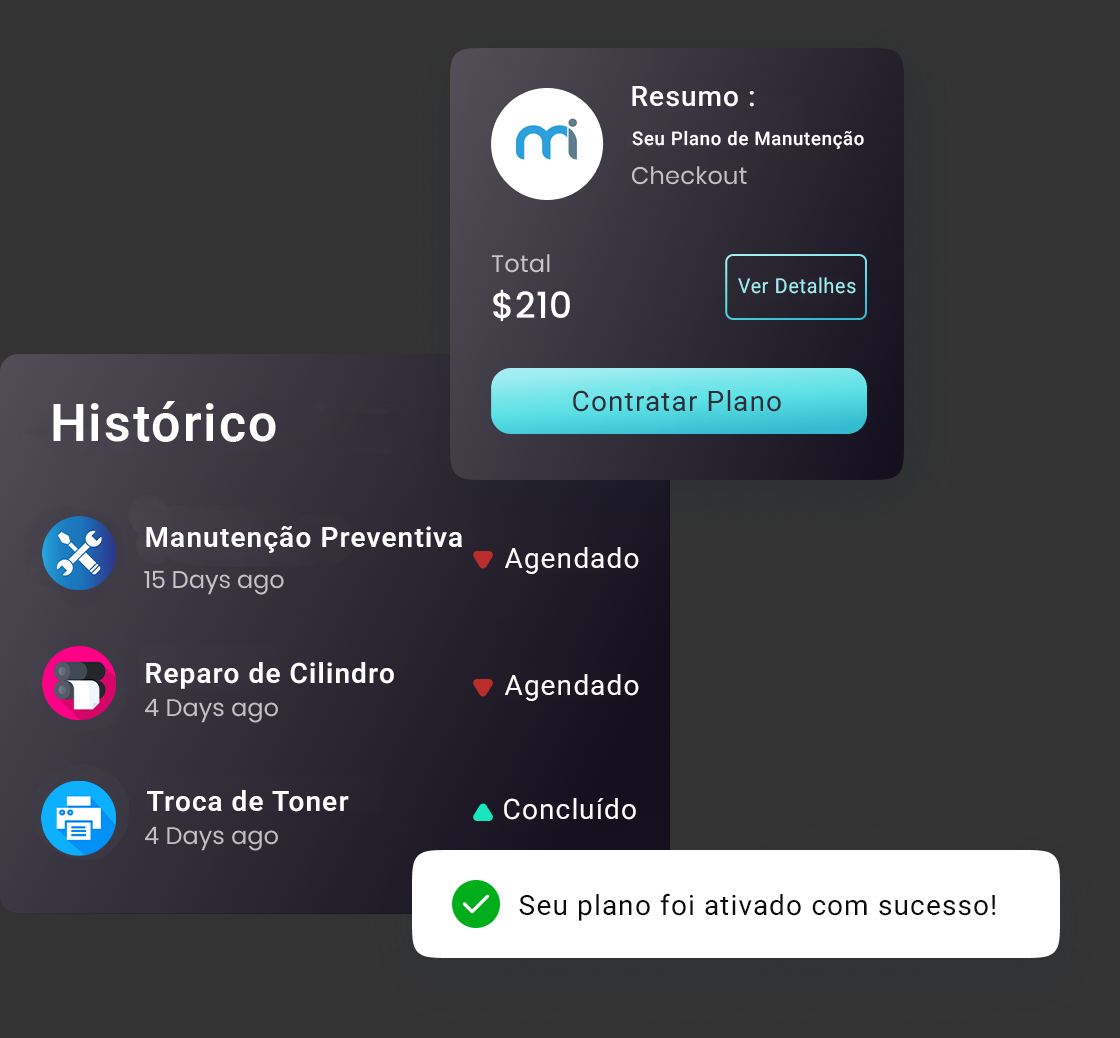
<style>
.page{position:relative;width:1120px;height:1038px;background:#333333}
.page>*{position:absolute;margin:0}
.t1{font:28px "Roboto-Medium";letter-spacing:0.04em;color:#ffffff}
.t2{font:18.6px "Roboto-Medium";letter-spacing:0.04em;color:#ffffff}
.t3{font:20.4px "Roboto-Regular";letter-spacing:0.04em;color:#a1edf1;scale:0.95 1}
.t4{font:28px "Roboto-Regular";letter-spacing:0.04em;color:#302c38}
.t5{font:28px "Roboto-SemiBold";letter-spacing:0.04em;color:#ffffff}
.t6{font:28px "Roboto-Regular";letter-spacing:0.04em;color:#ffffff}
.t7{font:28px "Roboto-Regular";letter-spacing:0.04em;color:#0c0a10}
</style>
<div class="page">
<p class="t1" style="left:632px;top:86px;width:122px;height:21px">Resumo :</p>
<p class="t2" style="left:632px;top:130px;width:232px;height:20px">Seu Plano de Manutenção</p>
<p class="t3" style="left:738px;top:277px;width:118px;height:17px">Ver Detalhes</p>
<p class="t4" style="left:573px;top:390px;width:208px;height:22px">Contratar Plano</p>
<p class="t5" style="left:146px;top:526px;width:316px;height:27px">Manutenção Preventiva</p>
<p class="t6" style="left:505px;top:547px;width:134px;height:27px">Agendado</p>
<p class="t5" style="left:146px;top:662px;width:248px;height:27px">Reparo de Cilindro</p>
<p class="t6" style="left:505px;top:674px;width:134px;height:27px">Agendado</p>
<p class="t5" style="left:147px;top:790px;width:202px;height:22px">Troca de Toner</p>
<p class="t6" style="left:504px;top:798px;width:132px;height:22px">Concluído</p>
<p class="t7" style="left:519px;top:893px;width:477px;height:28px">Seu plano foi ativado com sucesso!</p>
</div>
